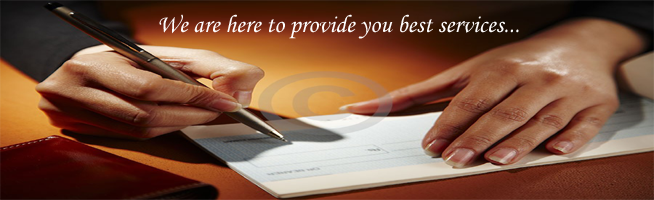
<style>
.page{position:relative;width:654px;height:200px}
.page>*{position:absolute;margin:0}
.t1{font:25px "MonotypeCorsiva";color:#fdfcfc}
</style>
<div class="page">
<p class="t1" style="left:159px;top:14px;width:360px;height:25px">We are here to provide you best services...</p>
</div>
